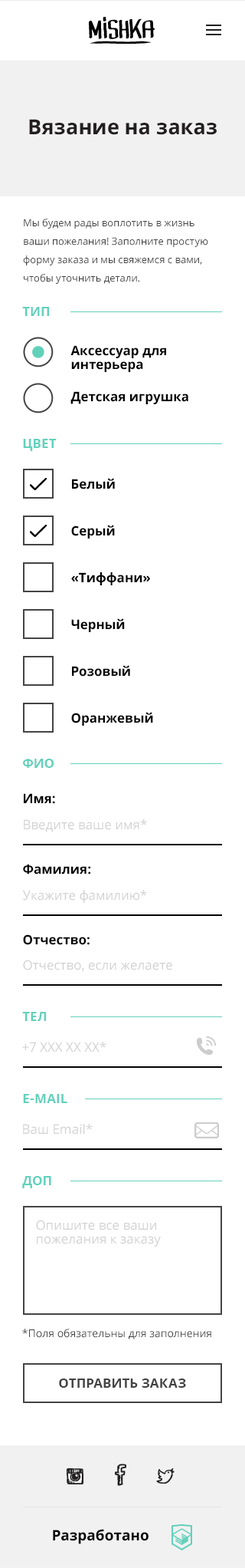
<style>
.page{position:relative;width:245px;height:1568px;background:#ffffff}
.page>*{position:absolute;margin:0}
.t1{font:20.7px "OpenSans-Bold";color:#231f20}
.t2{font:10px/18.4px "OpenSans";color:#444444}
.t3{font:13px "OpenSans-Bold";color:#63d1bb;text-transform:uppercase}
.t4{font:13px/13.8px "OpenSans-Bold";color:#000000}
.t5{font:13px "OpenSans-Bold";color:#000000}
.t6{font:13px "OpenSans";color:#d2d2d2}
.t7{font:13px/13.8px "OpenSans";color:#d2d2d2}
.t8{font:10.7px "OpenSans";color:#444444}
.t9{font:13px "OpenSans-Bold";color:#444444;text-transform:uppercase}
.t10{font:14.6px "OpenSans-Bold";color:#000000}
</style>
<div class="page">
<p class="t1" style="left:29px;top:119px;width:188px;height:16px">Вязание на заказ</p>
<p class="t2" style="left:23px;top:219px;width:186px;height:65px">Мы будем рады воплотить в жизнь ваши пожелания! Заполните простую форму заказа и мы свяжемся с вами, чтобы уточнить детали.</p>
<p class="t3" style="left:22px;top:307px;width:28px;height:9px">ТИП</p>
<p class="t4" style="left:71px;top:345px;width:95px;height:27px">Аксессуар для <br>интерьера</p>
<p class="t5" style="left:71px;top:391px;width:118px;height:13px">Детская игрушка</p>
<p class="t3" style="left:23px;top:439px;width:34px;height:12px">ЦВет</p>
<p class="t5" style="left:72px;top:478px;width:43px;height:11px">Белый</p>
<p class="t5" style="left:71px;top:525px;width:44px;height:14px">Серый</p>
<p class="t5" style="left:71px;top:572px;width:79px;height:13px">«Тиффани»</p>
<p class="t5" style="left:71px;top:618px;width:54px;height:14px">Черный</p>
<p class="t5" style="left:72px;top:665px;width:58px;height:12px">Розовый</p>
<p class="t5" style="left:71px;top:712px;width:82px;height:14px">Оранжевый</p>
<p class="t3" style="left:23px;top:759px;width:31px;height:9px">ФИО</p>
<p class="t5" style="left:24px;top:793px;width:31px;height:11px">Имя:</p>
<p class="t6" style="left:24px;top:819px;width:123px;height:13px">Введите ваше имя*</p>
<p class="t5" style="left:23px;top:864px;width:68px;height:11px">Фамилия:</p>
<p class="t6" style="left:22px;top:890px;width:125px;height:13px">Укажите фамилию*</p>
<p class="t5" style="left:23px;top:934px;width:67px;height:11px">Отчество:</p>
<p class="t6" style="left:23px;top:960px;width:150px;height:12px">Отчество, если желаете</p>
<p class="t3" style="left:22px;top:1012px;width:25px;height:9px">тел</p>
<p class="t6" style="left:22px;top:1042px;width:85px;height:10px">+7 ХХХ ХХ ХХ*</p>
<p class="t3" style="left:23px;top:1094px;width:45px;height:9px">E-mail</p>
<p class="t6" style="left:23px;top:1124px;width:70px;height:11px">Ваш Email*</p>
<p class="t3" style="left:22px;top:1176px;width:29px;height:12px">Доп</p>
<p class="t7" style="left:36px;top:1220px;width:125px;height:27px">Опишите все ваши <br>пожелания к заказу</p>
<p class="t8" style="left:22px;top:1329px;width:190px;height:10px">*Поля обязательны для заполнения</p>
<p class="t9" style="left:59px;top:1379px;width:127px;height:9px">ОТПРАВИТЬ ЗАКАЗ</p>
<p class="t10" style="left:53px;top:1529px;width:96px;height:15px">Разработано</p>
</div>
